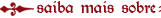
<style>
.page{position:relative;width:161px;height:18px;background:#ffffff}
.page>*{position:absolute;margin:0}
.t1{font:14.7px "Kelmscott-Regular";color:#8e0a12}
</style>
<div class="page">
<p class="t1" style="left:37px;top:1px;width:119px;height:13px">saiba mais sobre</p>
</div>
